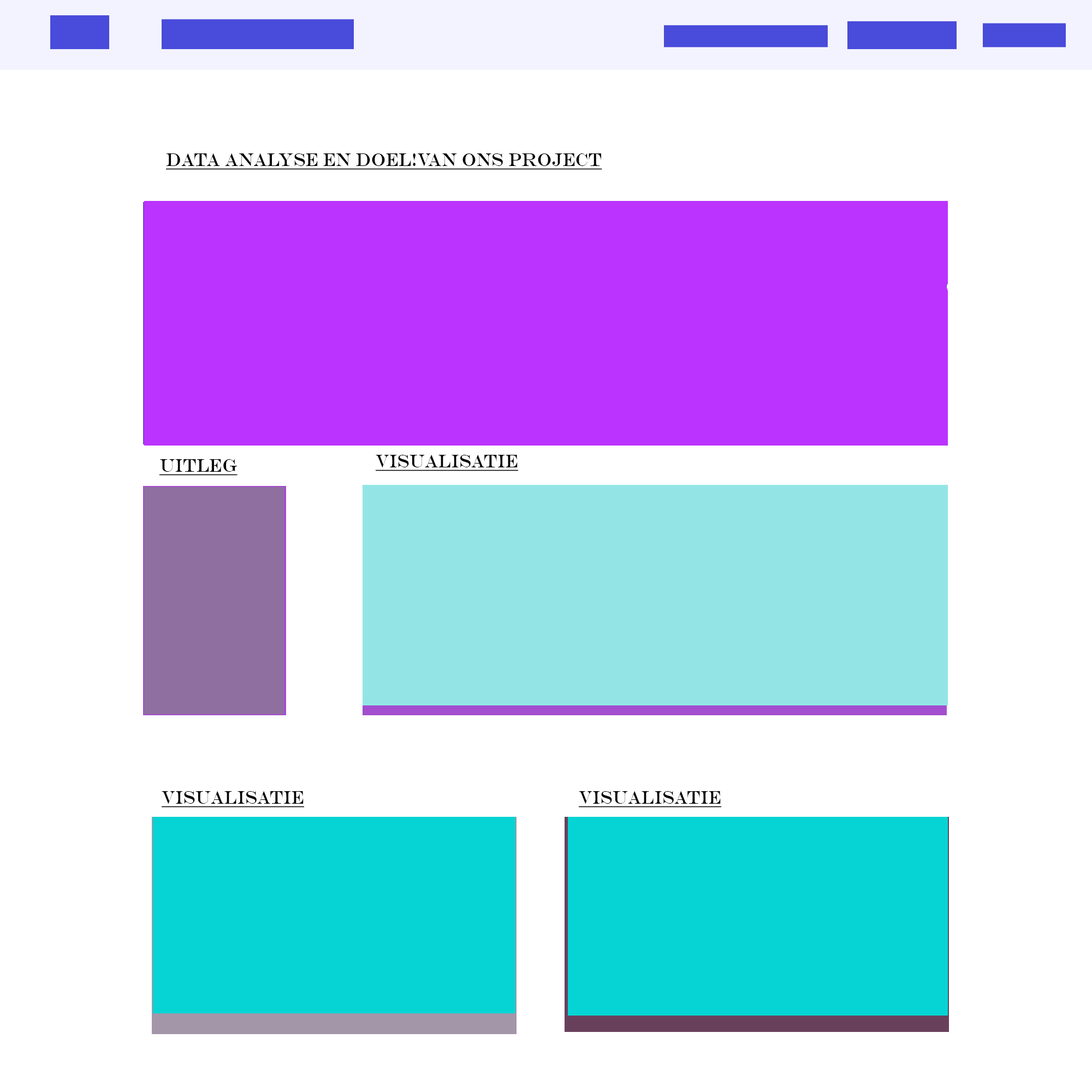
<style>
.page{position:relative;width:1092px;height:1092px;background:#ffffff}
.page>*{position:absolute;margin:0}
.t1{font:18.5px "EngraversMT";color:#020202;text-decoration:underline;scale:0.83 1}
</style>
<div class="page">
<p class="t1" style="left:166px;top:153px;width:436px;height:17px">Data analyse en doel!van ons project</p>
<p class="t1" style="left:159px;top:459px;width:79px;height:17px">uitleg</p>
<p class="t1" style="left:376px;top:455px;width:142px;height:16px">visualisatie</p>
<p class="t1" style="left:162px;top:791px;width:142px;height:17px">visualisatie</p>
<p class="t1" style="left:579px;top:791px;width:142px;height:17px">visualisatie</p>
</div>
